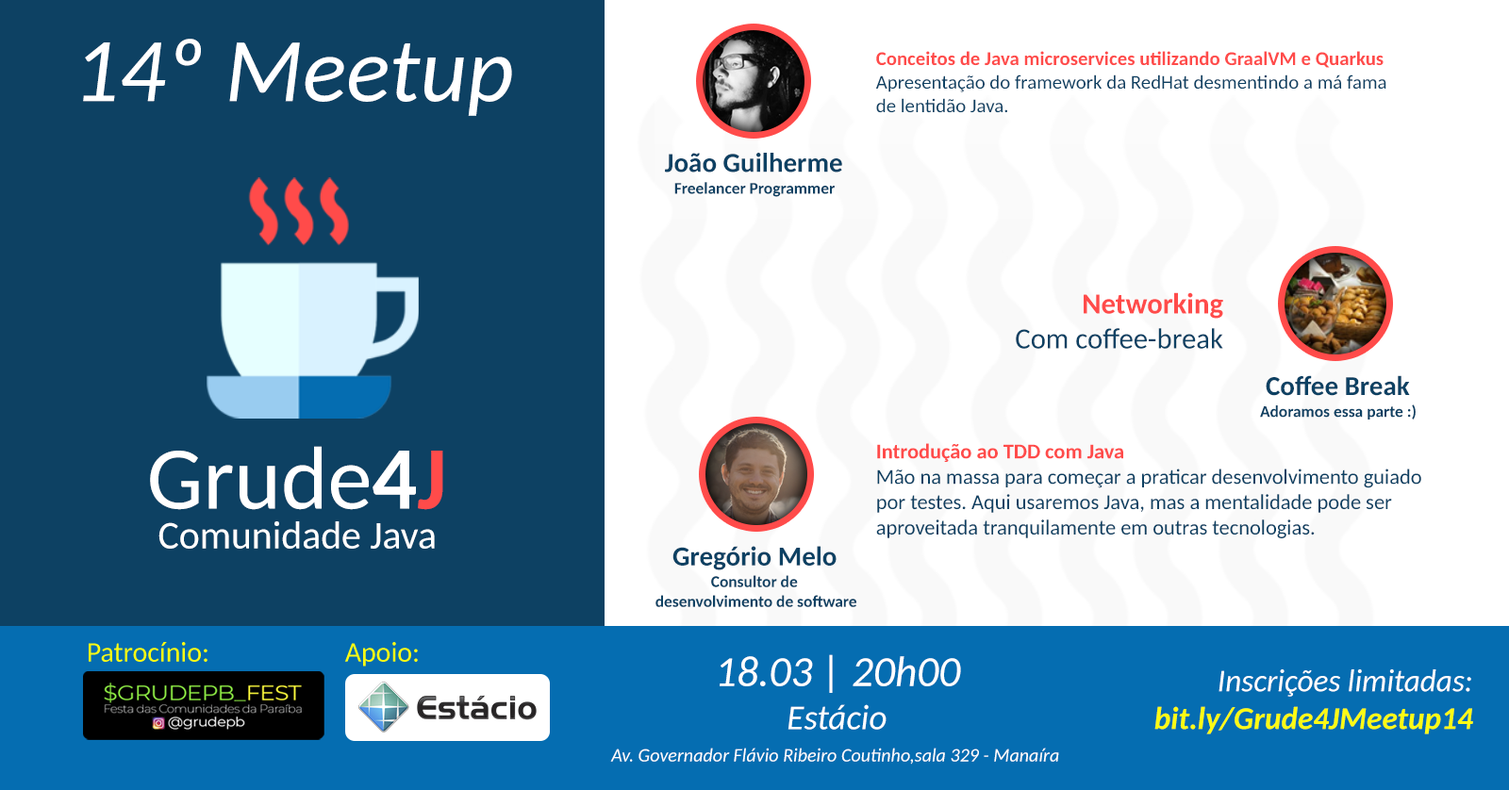
<style>
.page{position:relative;width:1509px;height:790px;background:#ffffff}
.page>*{position:absolute;margin:0}
.t1{font:91.3px "Carlito-Italic";color:#ffffff}
.t2{font:19.6px "Carlito";color:#0d4163}
.t3{font:19.6px "Carlito-Bold";color:#ff4b4a}
.t4{font:27.3px "Carlito-Bold";color:#0d4163}
.t5{font:16.4px "Carlito-Bold";color:#0d4163}
.t6{font:29px "Carlito";color:#0d4163}
.t7{font:29px "Carlito-Bold";color:#ff4b4a}
.t8{font:89.3px "Carlito";color:#ffffff}
.t9{font:89.3px "Carlito-Bold";color:#ffffff}
.t10{font:89.3px "Carlito-Bold";color:#ff4b4a}
.t11{font:21.1px "Carlito";color:#0d4163}
.t12{font:21.1px "Carlito-Bold";color:#ff4b4a}
.t13{font:39.3px "Carlito";color:#ffffff}
.t14{font:42.8px "Carlito-Italic";color:#ffffff}
.t15{font:31.4px "Carlito-BoldItalic";color:#fcfb14}
.t16{font:31.4px "Carlito-Italic";color:#ffffff}
.t17{font:35px "Carlito-Italic";color:#ffffff}
.t18{font:18.9px "Carlito-Italic";color:#ffffff}
</style>
<div class="page">
<p class="t1" style="left:83px;top:39px;width:429px;height:77px">14º Meetup</p>
<p class="t2" style="left:875px;top:51px;width:511px;height:62px"><span class="t3">Conceitos de Java microservices utilizando GraalVM e Quarkus<br></span>Apresentação do framework da RedHat desmentindo a má fama <br>de lentidão Java.</p>
<p class="t4" style="left:665px;top:153px;width:177px;height:20px">João Guilherme</p>
<p class="t5" style="left:674px;top:182px;width:161px;height:15px">Freelancer Programmer</p>
<p class="t6" style="left:1016px;top:292px;width:207px;height:57px;text-align:right"><span class="t7">Networking<br></span>Com coffee-break</p>
<p class="t4" style="left:1266px;top:375px;width:144px;height:21px">Coffee Break</p>
<p class="t5" style="left:1260px;top:405px;width:156px;height:15px">Adoramos essa parte :)</p>
<p class="t8" style="left:150px;top:446px;width:293px;height:64px">Grude<span class="t9">4</span><span class="t10">J</span></p>
<p class="t11" style="left:876px;top:443px;width:545px;height:95px"><span class="t12">Introdução ao TDD com Java<br></span>Mão na massa para começar a praticar desenvolvimento guiado <br>por testes. Aqui usaremos Java, mas a mentalidade pode ser <br>aproveitada tranquilamente em outras tecnologias.</p>
<p class="t13" style="left:158px;top:522px;width:277px;height:27px">Comunidade Java</p>
<p class="t4" style="left:672px;top:546px;width:164px;height:25px">Gregório Melo</p>
<p class="t5" style="left:655px;top:575px;width:201px;height:32px;text-align:center">Consultor de <br>desenvolvimento de software</p>
<p class="t14" style="left:720px;top:654px;width:241px;height:39px">18.03 | 20h00</p>
<p class="t15" style="left:1154px;top:670px;width:319px;height:65px;text-align:right"><span class="t16">Inscrições limitadas:<br></span>bit.ly/Grude4JMeetup14</p>
<p class="t17" style="left:787px;top:704px;width:99px;height:26px">Estácio</p>
<p class="t18" style="left:610px;top:748px;width:449px;height:17px">Av. Governador Flávio Ribeiro Coutinho,sala 329 - Manaíra</p>
</div>
